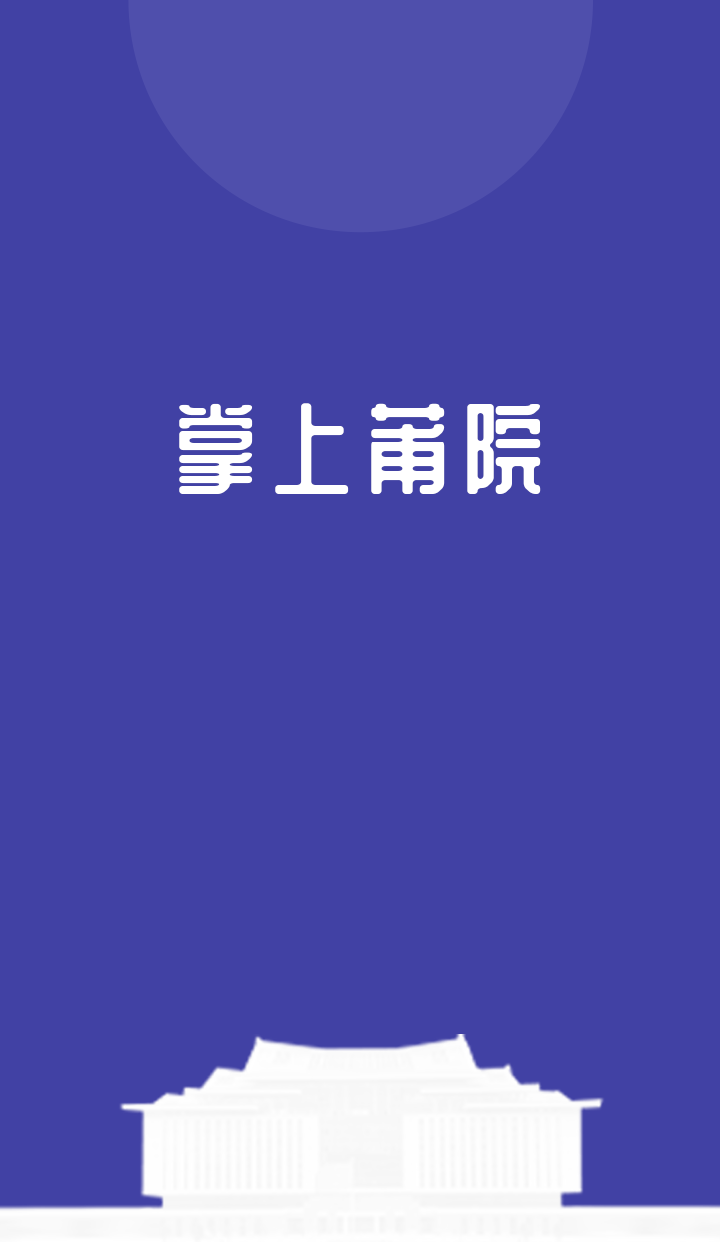
<style>
.page{position:relative;width:720px;height:1242px;background:#4141a4}
.page>*{position:absolute;margin:0}
.t1{font:98.8px "WD-XLLubrifontSC-Regular";letter-spacing:0.12em;color:#ffffff;scale:1.1 1}
</style>
<div class="page">
<p class="t1" style="left:179px;top:403px;width:362px;height:91px">掌上莆院</p>
</div>
